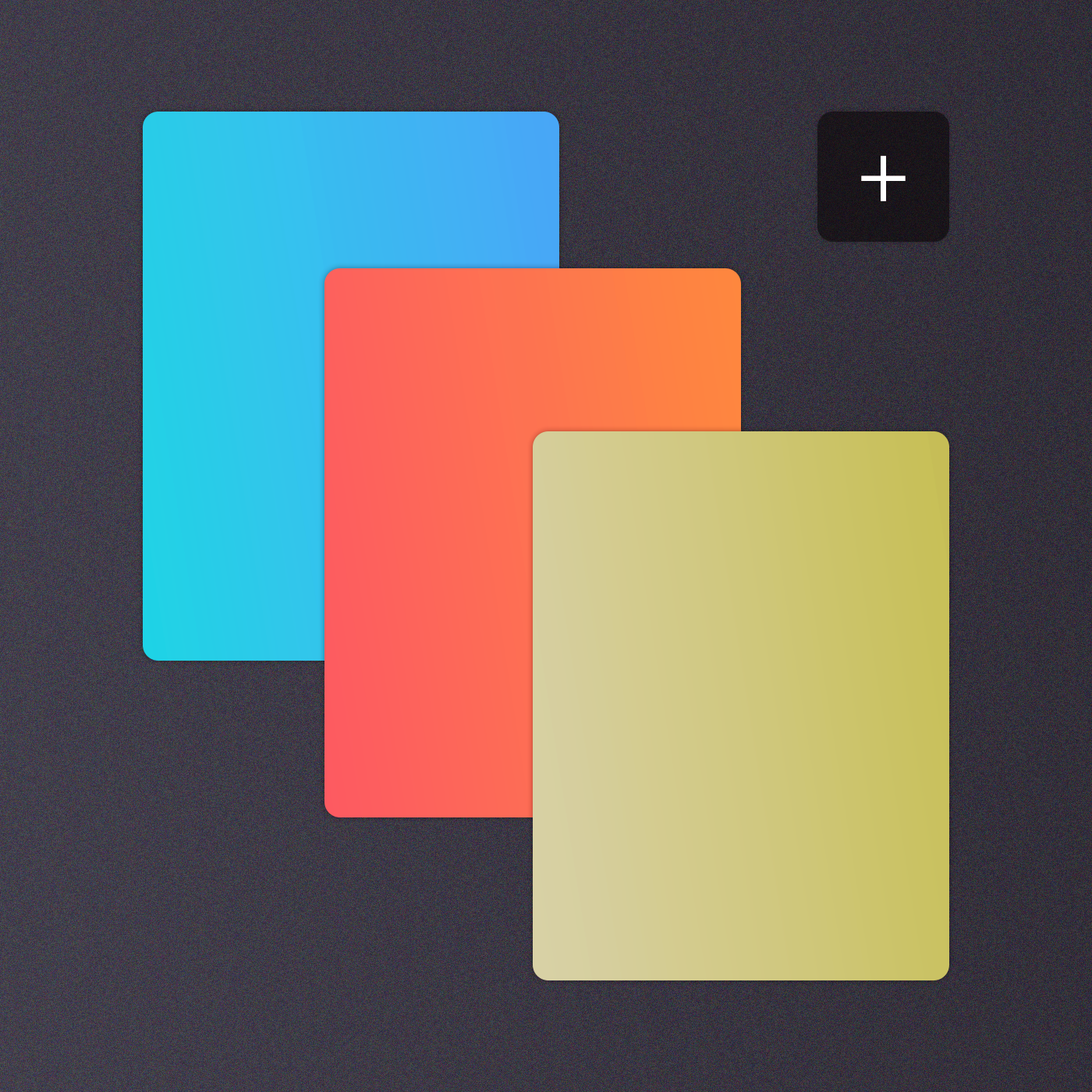
<style>
.page{position:relative;width:1092px;height:1092px}
.page>*{position:absolute;margin:0}
.t1{font:84.9px "MyriadPro-Regular";color:#ffffff}
</style>
<div class="page">
<p class="t1" style="left:861px;top:155px;width:45px;height:46px">+</p>
</div>
